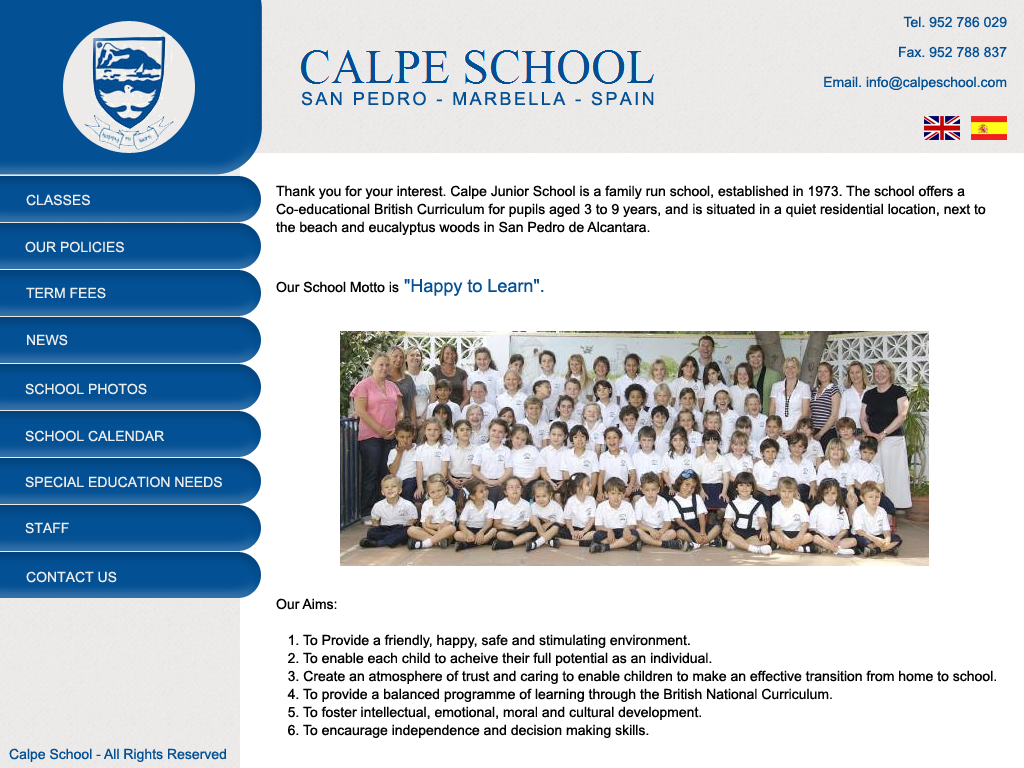
<style>
.page{position:relative;width:1024px;height:768px;background:#ffffff}
.page>*{position:absolute;margin:0}
.t1{font:14px/30px "ArialMT";color:#035094}
.t2{font:18px "ArialMT";letter-spacing:0.135em;color:#035094}
.t3{font:14px/18px "ArialMT";color:#010101}
.t4{font:14px/30px "ArialMT";color:#000000}
.t5{font:18px/30px "ArialMT";color:#035094}
.t6{font:14px "ArialMT";color:#edeaea}
.t7{font:14px/18px "ArialMT";color:#000000}
.t8{font:14px "ArialMT";color:#035094}
</style>
<div class="page">
<p class="t1" style="left:824px;top:16px;width:183px;height:74px;text-align:right">Tel. 952 786 029<br>Fax. 952 788 837<br>Email. info@calpeschool.com</p>
<p class="t2" style="left:301px;top:91px;width:353px;height:15px">SAN PEDRO - MARBELLA - SPAIN</p>
<p class="t3" style="left:276px;top:185px;width:710px;height:111px">Thank you for your interest. Calpe Junior School is a family run school, established in 1973. The school offers a<br>Co-educational British Curriculum for pupils aged 3 to 9 years, and is situated in a quiet residential location, next to<br>the beach and eucalyptus woods in San Pedro de Alcantara.<br><br><span class="t4">Our School Motto is</span><span class="t5"> "Happy to Learn".</span></p>
<p class="t6" style="left:26px;top:194px;width:64px;height:12px">CLASSES</p>
<p class="t6" style="left:25px;top:241px;width:99px;height:12px">OUR POLICIES</p>
<p class="t6" style="left:26px;top:287px;width:80px;height:12px">TERM FEES</p>
<p class="t6" style="left:27px;top:334px;width:41px;height:12px">NEWS</p>
<p class="t6" style="left:25px;top:383px;width:122px;height:12px">SCHOOL PHOTOS</p>
<p class="t6" style="left:25px;top:430px;width:140px;height:12px">SCHOOL CALENDAR</p>
<p class="t6" style="left:25px;top:476px;width:197px;height:12px">SPECIAL EDUCATION NEEDS</p>
<p class="t6" style="left:25px;top:522px;width:44px;height:12px">STAFF</p>
<p class="t6" style="left:26px;top:571px;width:91px;height:12px">CONTACT US</p>
<p class="t7" style="left:276px;top:598px;width:720px;height:140px">Our Aims:<br><br>   1. To Provide a friendly, happy, safe and stimulating environment.<br>   2. To enable each child to acheive their full potential as an individual.<br>   3. Create an atmosphere of trust and caring to enable children to make an effective transition from home to school.<br>   4. To provide a balanced programme of learning through the British National Curriculum.<br>   5. To foster intellectual, emotional, moral and cultural development.<br>   6. To encaurage independence and decision making skills.</p>
<p class="t8" style="left:9px;top:748px;width:217px;height:14px">Calpe School - All Rights Reserved</p>
</div>
